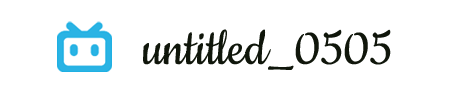
<style>
.page{position:relative;width:470px;height:96px;background:#ffffff}
.page>*{position:absolute;margin:0}
.t1{font:57.5px "Cookie-Regular";color:#10160b}
</style>
<div class="page">
<p class="t1" style="left:143px;top:29px;width:248px;height:41px">untitled_0505</p>
</div>
